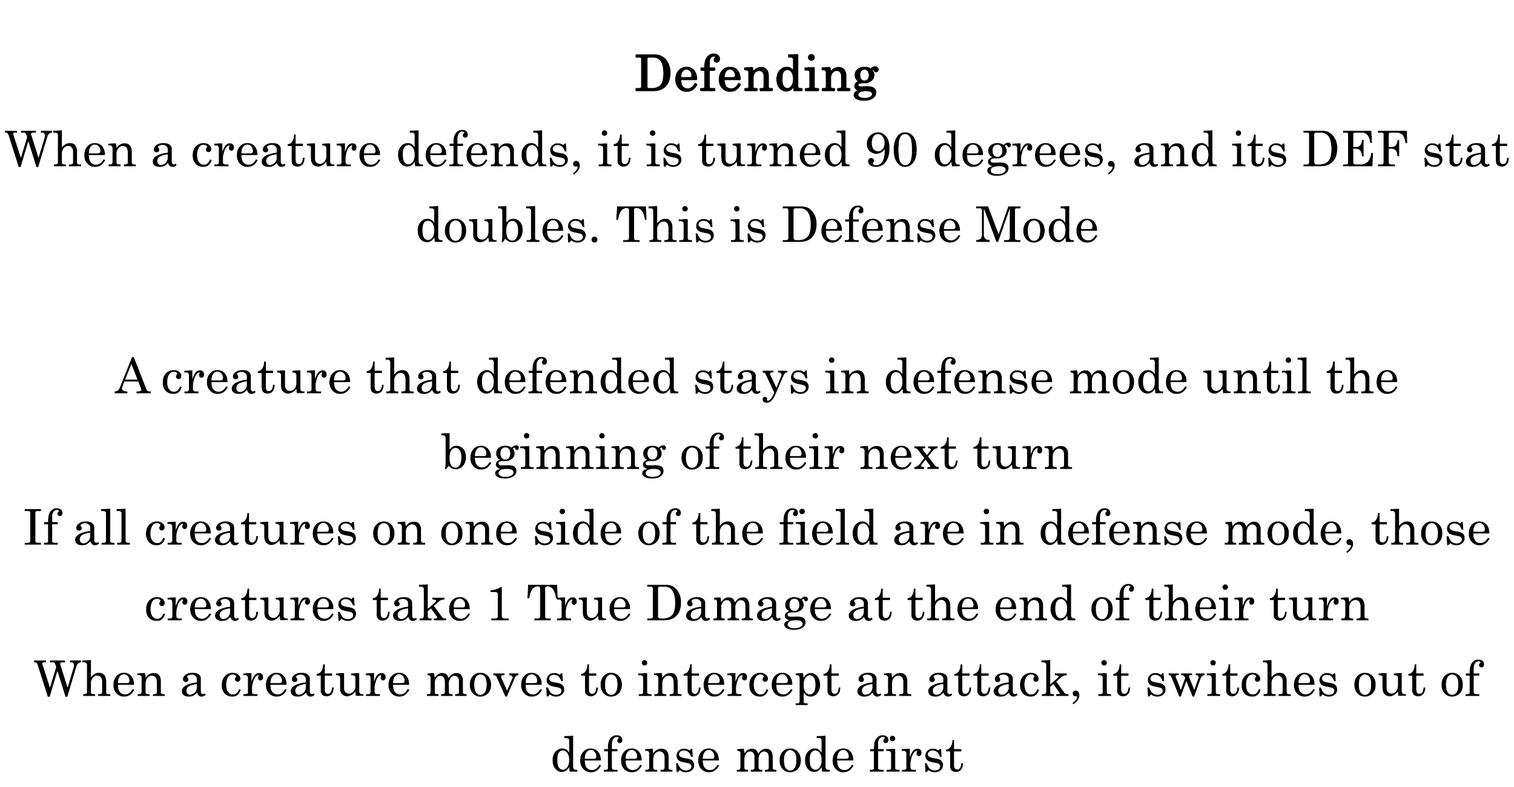
<style>
.page{position:relative;width:1514px;height:787px;background:#ffffff}
.page>*{position:absolute;margin:0}
.t1{font:84.1px/75.7px "Century";color:#000000}
.t2{font:84.1px/75.7px "Century";color:#000000;font-weight:bold}
</style>
<div class="page">
<p class="t1" style="left:5px;top:53px;width:1504px;height:720px;text-align:center"><span class="t2">Defending<br></span>When a creature defends, it is turned 90 degrees, and its DEF stat doubles. This is Defense Mode<br><br>A creature that defended stays in defense mode until the beginning of their next turn<br>If all creatures on one side of the field are in defense mode, those creatures take 1 True Damage at the end of their turn<br>When a creature moves to intercept an attack, it switches out of defense mode first</p>
</div>
